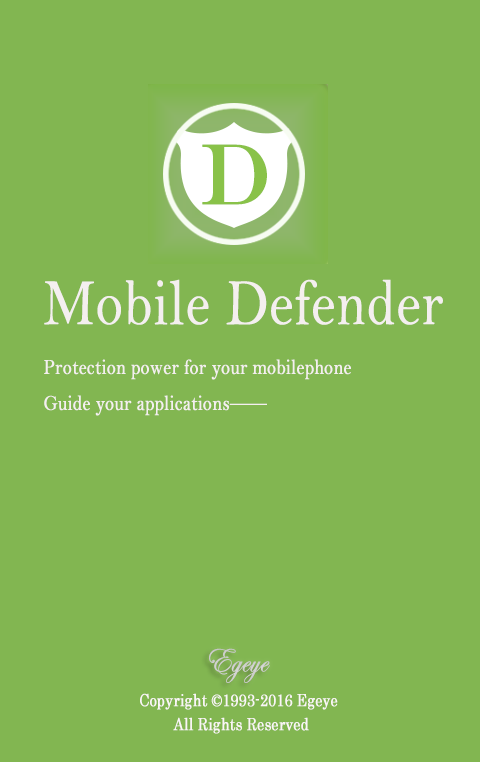
<style>
.page{position:relative;width:480px;height:762px;background:#82b651}
.page>*{position:absolute;margin:0}
.t1{font:21.6px/36px "BellMT";color:#f4efef;font-weight:bold;scale:0.83 1}
.t2{font:66px/80px "BellMT";color:#f4efef;font-weight:bold;scale:0.83 1}
.t3{font:36px "EdwardianScriptITC";color:#cfcfcf;font-weight:bold;scale:0.83 1}
.t4{font:16.8px/24px "Century";color:#faf6f6;font-weight:bold;scale:0.83 1}
</style>
<div class="page">
<p class="t1" style="left:44px;top:279px;width:399px;height:137px"><span class="t2">Mobile Defender<br></span>Protection power for your mobilephone<br>Guide your applications——</p>
<p class="t3" style="left:209px;top:648px;width:61px;height:35px">Egeye</p>
<p class="t4" style="left:140px;top:693px;width:198px;height:41px">Copyright ©1993-2016 Egeye<br>        All Rights Reserved</p>
</div>
